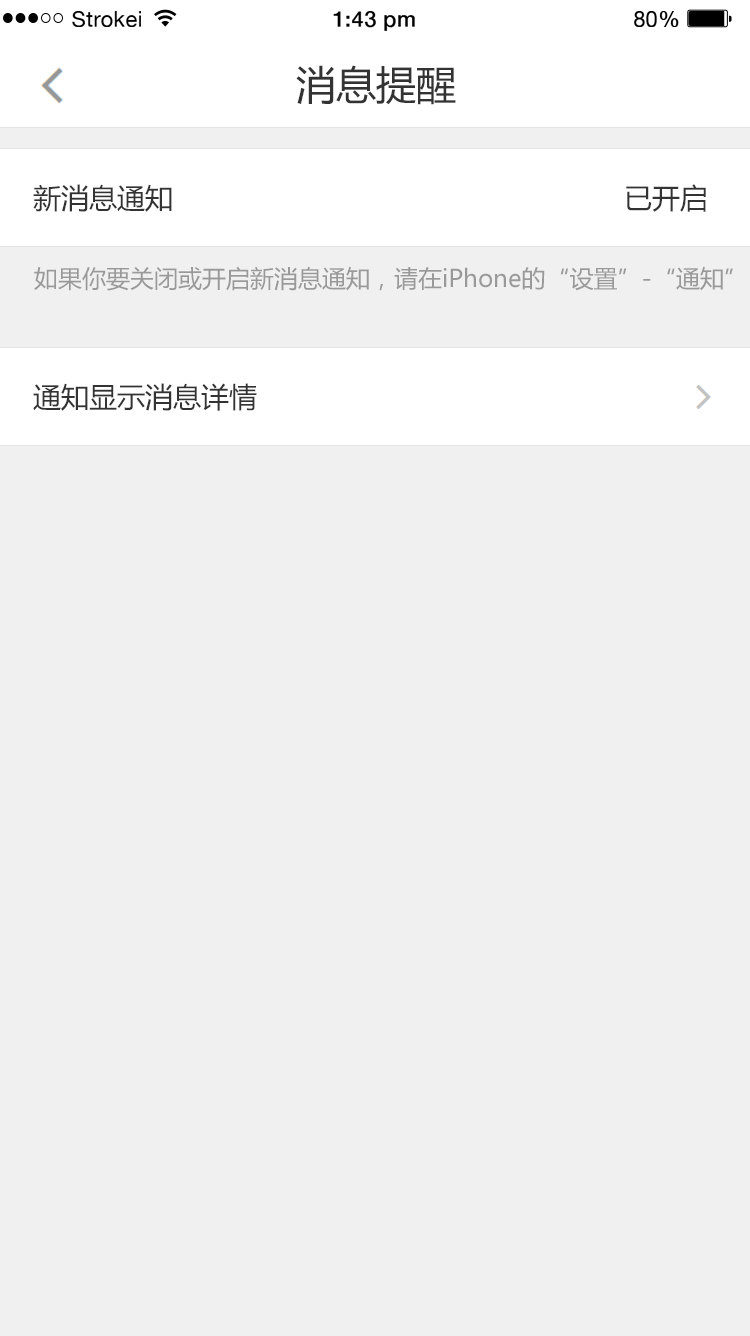
<style>
.page{position:relative;width:750px;height:1336px;background:#f0f0f0}
.page>*{position:absolute;margin:0}
.t1{font:21.8px "HelveticaNeue";letter-spacing:0.02em;color:#000000}
.t2{font:21.8px "HelveticaNeue-Medium";letter-spacing:0.02em;color:#000000}
.t3{font:40px "MicrosoftYaHei";color:#333333}
.t4{font:28px "MicrosoftYaHei";color:#333333}
.t5{font:24px "MicrosoftYaHei";color:#999999}
</style>
<div class="page">
<p class="t1" style="left:72px;top:11px;width:69px;height:16px">Strokei</p>
<p class="t2" style="left:333px;top:11px;width:82px;height:20px">1:43 pm</p>
<p class="t1" style="left:634px;top:11px;width:45px;height:16px">80<span class="t2">%</span></p>
<p class="t3" style="left:296px;top:65px;width:160px;height:40px">消息提醒</p>
<p class="t4" style="left:33px;top:184px;width:139px;height:28px">新消息通知</p>
<p class="t4" style="left:626px;top:184px;width:80px;height:28px">已开启</p>
<p class="t5" style="left:34px;top:266px;width:699px;height:25px">如果你要关闭或开启新消息通知，请在iPhone的“设置”-“通知”</p>
<p class="t4" style="left:33px;top:383px;width:224px;height:28px">通知显示消息详情</p>
</div>
